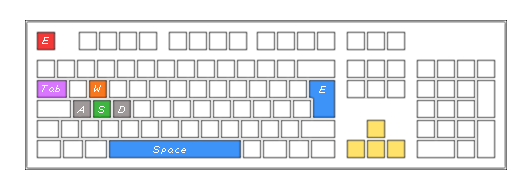
<style>
.page{position:relative;width:523px;height:193px;background:#ffffff}
.page>*{position:absolute;margin:0}
.t1{font:11px "ZAPFont";letter-spacing:-0.1em;color:#ffffff}
.t2{font:11px "ZAPFont";color:#ffffff}
.t3{font:11px "ZAPFont";letter-spacing:-0.11em;color:#ffffff}
</style>
<div class="page">
<p class="t1" style="left:42px;top:37px;width:7px;height:7px">E</p>
<p class="t1" style="left:42px;top:85px;width:18px;height:7px">Tab</p>
<p class="t2" style="left:94px;top:85px;width:7px;height:7px">W</p>
<p class="t1" style="left:319px;top:86px;width:7px;height:7px">E</p>
<p class="t3" style="left:77px;top:106px;width:48px;height:7px">A  S  D</p>
<p class="t1" style="left:153px;top:146px;width:33px;height:8px">Space</p>
</div>
